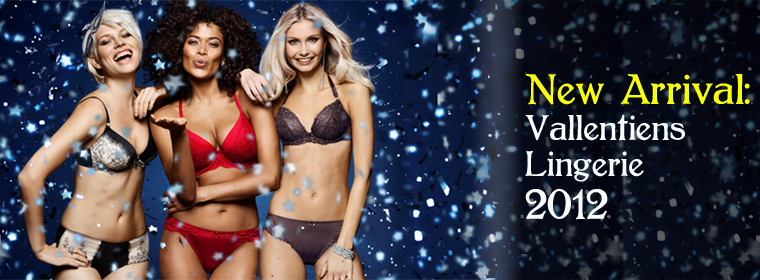
<style>
.page{position:relative;width:760px;height:280px}
.page>*{position:absolute;margin:0}
.t1{font:30px "Bolton";color:#f9fcfd}
.t2{font:36px "Bolton";color:#f9fe06}
.t3{font:36px "Bolton";color:#f9fcfd}
</style>
<div class="page">
<p class="t1" style="left:525px;top:73px;width:225px;height:147px"><span class="t2">New Arrival:<br></span>Vallentiens <br>Lingerie <br><span class="t3">2012</span></p>
</div>
